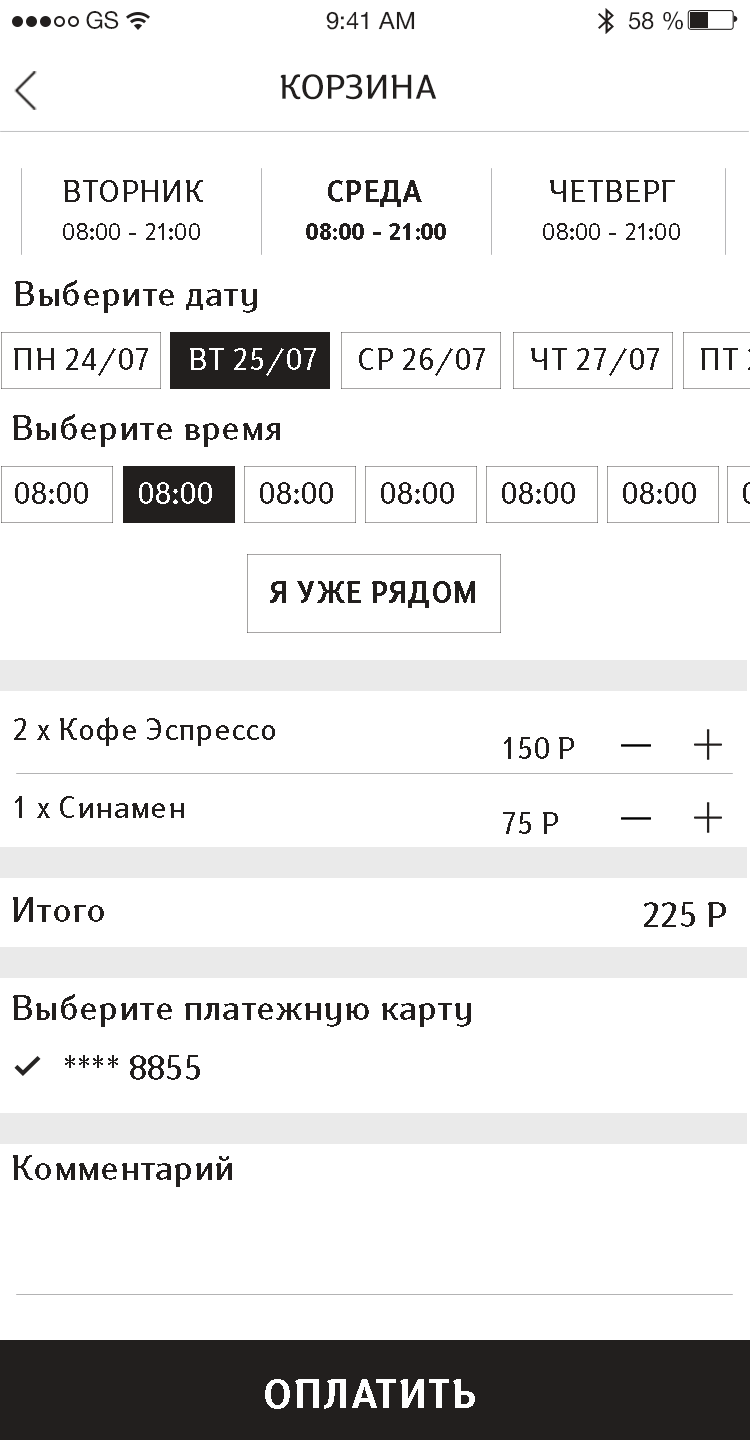
<style>
.page{position:relative;width:750px;height:1440px;background:#ffffff}
.page>*{position:absolute;margin:0}
.t1{font:24px "HelveticaNeueCyr-Roman";color:#221f1e}
.t2{font:34px "SusanBook-Regular";color:#221f1e}
.t3{font:30px "SusanBook-Regular";letter-spacing:0.012em;color:#221f1e}
.t4{font:30px "SusanBold-Regular";letter-spacing:0.012em;color:#221f1e}
.t5{font:24px "SusanBook-Regular";letter-spacing:0.012em;color:#221f1e}
.t6{font:24px "SusanBold-Regular";letter-spacing:0.012em;color:#221f1e}
.t7{font:34px "SusanBook-Regular";letter-spacing:0.012em;color:#221f1e}
.t8{font:30px "SusanBook-Regular";letter-spacing:0.012em;color:#ffffff}
.t9{font:40px "SusanBold-Regular";letter-spacing:0.012em;color:#fefefe}
</style>
<div class="page">
<p class="t1" style="left:86px;top:11px;width:33px;height:18px">GS</p>
<p class="t1" style="left:326px;top:11px;width:89px;height:19px">9:41 AM</p>
<p class="t1" style="left:628px;top:11px;width:55px;height:19px">58 %</p>
<p class="t2" style="left:280px;top:74px;width:157px;height:26px">КОРЗИНА</p>
<p class="t3" style="left:64px;top:180px;width:139px;height:22px">ВТОРНИК</p>
<p class="t4" style="left:328px;top:180px;width:94px;height:27px">СРЕДА</p>
<p class="t3" style="left:550px;top:180px;width:125px;height:22px">ЧЕТВЕРГ</p>
<p class="t5" style="left:63px;top:223px;width:137px;height:17px">08:00 - 21:00</p>
<p class="t6" style="left:306px;top:223px;width:140px;height:17px">08:00 - 21:00</p>
<p class="t5" style="left:543px;top:223px;width:137px;height:17px">08:00 - 21:00</p>
<p class="t7" style="left:15px;top:280px;width:242px;height:33px">Выберите дату</p>
<p class="t3" style="left:14px;top:348px;width:134px;height:28px">ПН 24/07</p>
<p class="t8" style="left:190px;top:348px;width:126px;height:28px">ВТ 25/07</p>
<p class="t3" style="left:359px;top:348px;width:126px;height:28px">СР 26/07</p>
<p class="t3" style="left:531px;top:348px;width:128px;height:28px">ЧТ 27/07</p>
<p class="t7" style="left:13px;top:414px;width:267px;height:33px">Выберите время</p>
<p class="t3" style="left:15px;top:482px;width:73px;height:22px">08:00</p>
<p class="t8" style="left:139px;top:482px;width:73px;height:22px">08:00</p>
<p class="t3" style="left:260px;top:482px;width:73px;height:22px">08:00</p>
<p class="t3" style="left:381px;top:482px;width:73px;height:22px">08:00</p>
<p class="t3" style="left:502px;top:482px;width:73px;height:22px">08:00</p>
<p class="t3" style="left:623px;top:482px;width:73px;height:22px">08:00</p>
<p class="t4" style="left:270px;top:581px;width:205px;height:27px">Я УЖЕ РЯДОМ</p>
<p class="t3" style="left:14px;top:717px;width:261px;height:29px">2 х Кофе Эспрессо</p>
<p class="t3" style="left:504px;top:737px;width:70px;height:22px">150 Р</p>
<p class="t3" style="left:15px;top:796px;width:169px;height:22px">1 х Синамен</p>
<p class="t3" style="left:503px;top:812px;width:55px;height:22px">75 Р</p>
<p class="t7" style="left:13px;top:897px;width:91px;height:25px">Итого</p>
<p class="t7" style="left:644px;top:902px;width:82px;height:25px">225 Р</p>
<p class="t7" style="left:13px;top:994px;width:458px;height:33px">Выберите платежную карту</p>
<p class="t7" style="left:65px;top:1055px;width:135px;height:25px">**** 8855</p>
<p class="t7" style="left:13px;top:1155px;width:219px;height:32px">Комментарий</p>
<p class="t9" style="left:265px;top:1379px;width:210px;height:30px">ОПЛАТИТЬ</p>
</div>
